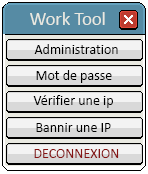
<style>
.page{position:relative;width:148px;height:174px;background:#d9d9d9}
.page>*{position:absolute;margin:0}
.t1{font:14px "Calibri";color:#000000}
.t2{font:14px "Calibri";color:#871414}
</style>
<div class="page">
<p class="t1" style="left:34px;top:44px;width:84px;height:10px">Administration</p>
<p class="t1" style="left:36px;top:70px;width:76px;height:13px">Mot de passe</p>
<p class="t1" style="left:33px;top:95px;width:80px;height:13px">Vérifier une ip</p>
<p class="t1" style="left:36px;top:123px;width:75px;height:9px">Bannir une IP</p>
<p class="t2" style="left:34px;top:149px;width:85px;height:9px">DECONNEXION</p>
</div>
